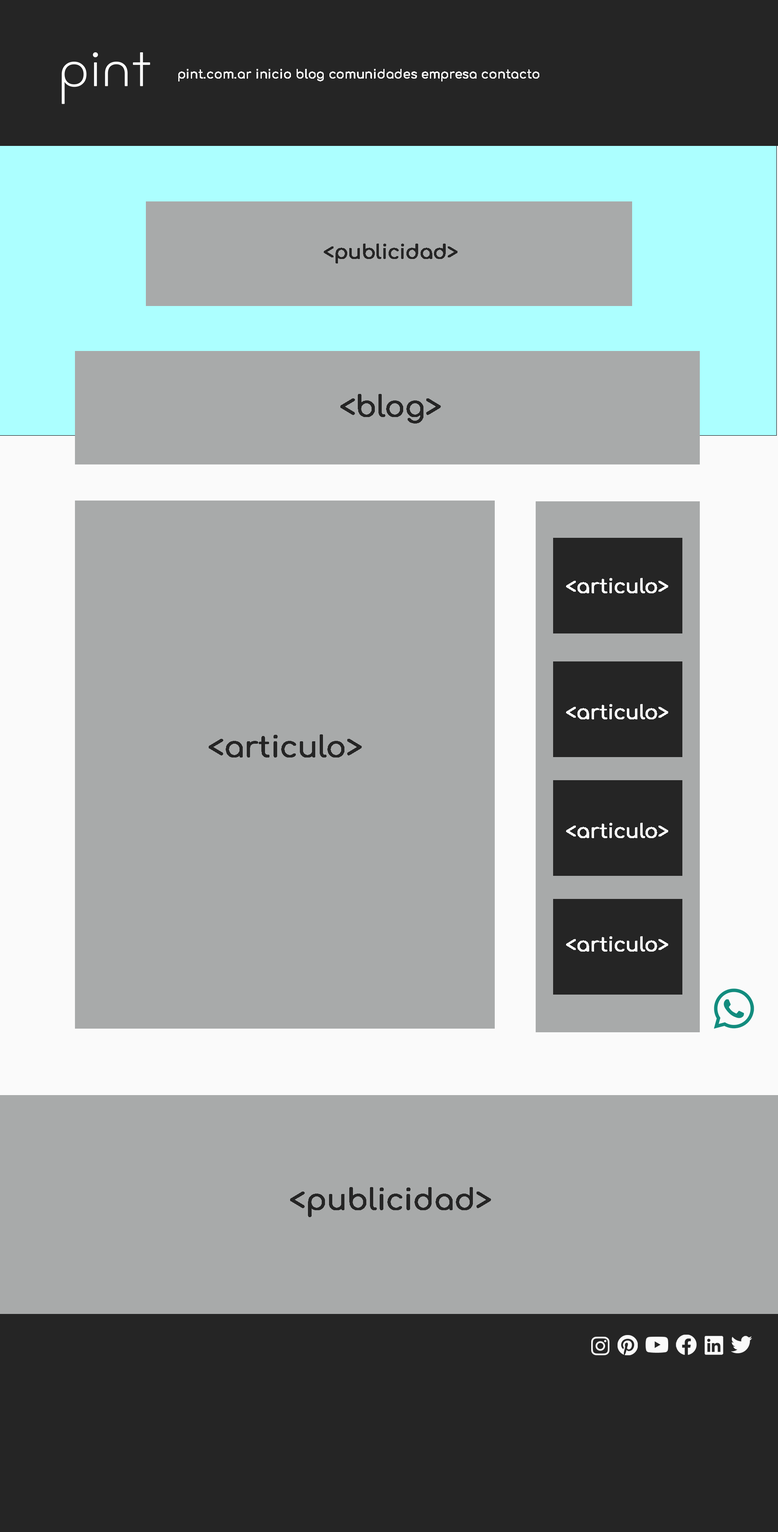
<style>
.page{position:relative;width:778px;height:1532px;background:#a8aaaa}
.page>*{position:absolute;margin:0}
.t1{font:12.2px "Comfortaa-Medium";letter-spacing:-0.01em;color:#fafafa;font-weight:bold}
.t2{font:19.5px "Comfortaa-Medium";letter-spacing:-0.01em;color:#252525;font-weight:bold}
.t3{font:29.2px "Comfortaa-Medium";letter-spacing:-0.01em;color:#252525;font-weight:bold}
.t4{font:19.5px "Comfortaa-Medium";letter-spacing:-0.01em;color:#fafafa;font-weight:bold}
</style>
<div class="page">
<p class="t1" style="left:178px;top:69px;width:362px;height:12px">pint.com.ar inicio blog comunidades empresa contacto</p>
<p class="t2" style="left:324px;top:244px;width:134px;height:19px">&lt;publicidad&gt;</p>
<p class="t3" style="left:340px;top:394px;width:101px;height:30px">&lt;blog&gt;</p>
<p class="t4" style="left:566px;top:578px;width:102px;height:15px">&lt;articulo&gt;</p>
<p class="t4" style="left:566px;top:704px;width:102px;height:15px">&lt;articulo&gt;</p>
<p class="t3" style="left:209px;top:734px;width:153px;height:24px">&lt;articulo&gt;</p>
<p class="t4" style="left:566px;top:823px;width:102px;height:15px">&lt;articulo&gt;</p>
<p class="t4" style="left:566px;top:936px;width:102px;height:16px">&lt;articulo&gt;</p>
<p class="t3" style="left:290px;top:1187px;width:201px;height:30px">&lt;publicidad&gt;</p>
</div>
